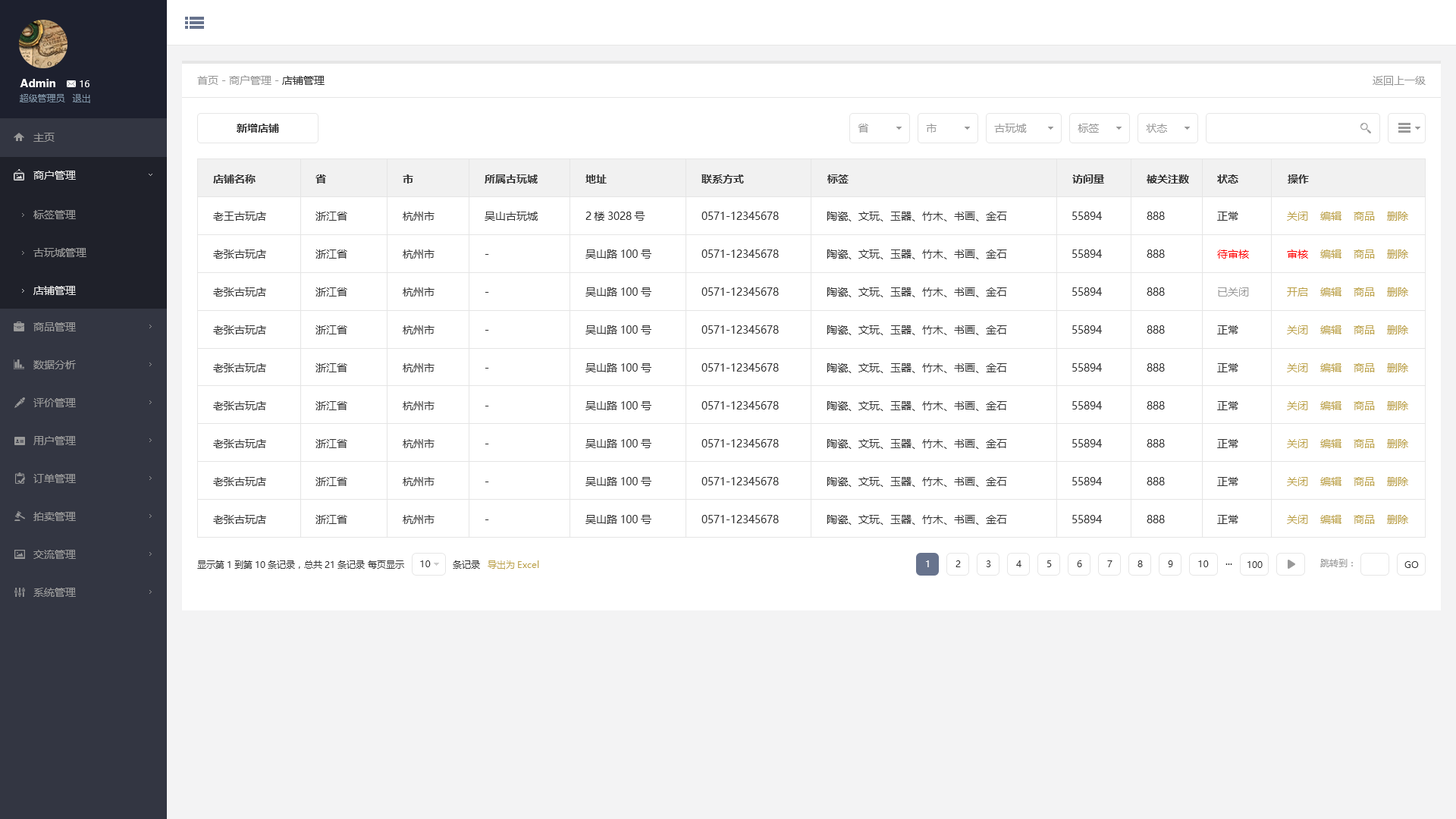
<style>
.page{position:relative;width:1456px;height:819px;background:#ffffff}
.page>*{position:absolute;margin:0}
.t1{font:10.6px "MicrosoftYaHei";color:#999999}
.t2{font:10.6px "MicrosoftYaHei";color:#333333}
.t3{font:10.6px "MicrosoftYaHei-Bold";color:#ffffff}
.t4{font:9.1px "MicrosoftYaHei";color:#ffffff}
.t5{font:9.1px "MicrosoftYaHei";color:#8095a8}
.t6{font:10.6px "MicrosoftYaHei-Bold";color:#333333}
.t7{font:10.6px/37.9px "MicrosoftYaHei";color:#999999}
.t8{font:10.6px/37.9px "MicrosoftYaHei";color:#e6e6e6}
.t9{font:10.6px/37.9px "MicrosoftYaHei";color:#333333}
.t10{font:10.6px/37.9px "MicrosoftYaHei";color:#ff0000}
.t11{font:10.6px/37.9px "MicrosoftYaHei";color:#bda34a}
.t12{font:9.1px "MicrosoftYaHei";color:#333333}
.t13{font:9.1px "MicrosoftYaHei";color:#bda34a}
.t14{font:9.1px "MicrosoftYaHei";color:#999999}
</style>
<div class="page">
<p class="t1" style="left:197px;top:75px;width:128px;height:10px">首页 - 商户管理 - <span class="t2">店铺管理</span></p>
<p class="t1" style="left:1373px;top:76px;width:53px;height:10px">返回上一级</p>
<p class="t3" style="left:20px;top:79px;width:35px;height:8px">Admin</p>
<p class="t4" style="left:80px;top:80px;width:9px;height:7px">16</p>
<p class="t5" style="left:20px;top:94px;width:45px;height:8px">超级管理员</p>
<p class="t5" style="left:72px;top:94px;width:18px;height:9px">退出</p>
<p class="t6" style="left:237px;top:124px;width:42px;height:9px">新增店铺</p>
<p class="t1" style="left:858px;top:124px;width:10px;height:9px">省</p>
<p class="t1" style="left:926px;top:124px;width:11px;height:9px">市</p>
<p class="t1" style="left:994px;top:124px;width:33px;height:9px">古玩城</p>
<p class="t1" style="left:1078px;top:124px;width:21px;height:9px">标签</p>
<p class="t1" style="left:1146px;top:124px;width:21px;height:9px">状态</p>
<p class="t7" style="left:33px;top:133px;width:43px;height:464px">主页<br><span class="t8">商户管理<br><br><br><br></span>商品管理<br>数据分析<br>评价管理<br>用户管理<br>订单管理<br>拍卖管理<br>交流管理<br>系统管理</p>
<p class="t6" style="left:213px;top:174px;width:43px;height:10px">店铺名称</p>
<p class="t6" style="left:315px;top:174px;width:11px;height:10px">省</p>
<p class="t6" style="left:403px;top:174px;width:10px;height:10px">市</p>
<p class="t6" style="left:485px;top:174px;width:53px;height:10px">所属古玩城</p>
<p class="t6" style="left:585px;top:174px;width:22px;height:10px">地址</p>
<p class="t6" style="left:701px;top:174px;width:43px;height:10px">联系方式</p>
<p class="t6" style="left:827px;top:174px;width:22px;height:10px">标签</p>
<p class="t6" style="left:1072px;top:174px;width:32px;height:10px">访问量</p>
<p class="t6" style="left:1147px;top:174px;width:42px;height:10px">被关注数</p>
<p class="t6" style="left:1217px;top:174px;width:21px;height:10px">状态</p>
<p class="t6" style="left:1288px;top:174px;width:21px;height:10px">操作</p>
<p class="t7" style="left:33px;top:210px;width:53px;height:85px">标签管理<br>古玩城管理<br><span class="t8">店铺管理</span></p>
<p class="t9" style="left:213px;top:212px;width:53px;height:312px">老王古玩店<br>老张古玩店<br>老张古玩店<br>老张古玩店<br>老张古玩店<br>老张古玩店<br>老张古玩店<br>老张古玩店<br>老张古玩店</p>
<p class="t9" style="left:315px;top:212px;width:32px;height:312px">浙江省<br>浙江省<br>浙江省<br>浙江省<br>浙江省<br>浙江省<br>浙江省<br>浙江省<br>浙江省</p>
<p class="t9" style="left:403px;top:212px;width:32px;height:312px">杭州市<br>杭州市<br>杭州市<br>杭州市<br>杭州市<br>杭州市<br>杭州市<br>杭州市<br>杭州市</p>
<p class="t9" style="left:485px;top:212px;width:53px;height:308px">吴山古玩城<br>-<br>-<br>-<br>-<br>-<br>-<br>-<br>-</p>
<p class="t9" style="left:585px;top:212px;width:66px;height:312px">2楼3028号<br>吴山路100号<br>吴山路100号<br>吴山路100号<br>吴山路100号<br>吴山路100号<br>吴山路100号<br>吴山路100号<br>吴山路100号</p>
<p class="t9" style="left:701px;top:212px;width:78px;height:311px">0571-12345678<br>0571-12345678<br>0571-12345678<br>0571-12345678<br>0571-12345678<br>0571-12345678<br>0571-12345678<br>0571-12345678<br>0571-12345678</p>
<p class="t9" style="left:827px;top:212px;width:180px;height:313px">陶瓷、文玩、玉器、竹木、书画、金石 <br>陶瓷、文玩、玉器、竹木、书画、金石 <br>陶瓷、文玩、玉器、竹木、书画、金石 <br>陶瓷、文玩、玉器、竹木、书画、金石 <br>陶瓷、文玩、玉器、竹木、书画、金石 <br>陶瓷、文玩、玉器、竹木、书画、金石 <br>陶瓷、文玩、玉器、竹木、书画、金石 <br>陶瓷、文玩、玉器、竹木、书画、金石 <br>陶瓷、文玩、玉器、竹木、书画、金石</p>
<p class="t9" style="left:1072px;top:212px;width:30px;height:311px">55894<br>55894<br>55894<br>55894<br>55894<br>55894<br>55894<br>55894<br>55894</p>
<p class="t9" style="left:1147px;top:212px;width:18px;height:311px">888<br>888<br>888<br>888<br>888<br>888<br>888<br>888<br>888</p>
<p class="t9" style="left:1217px;top:212px;width:32px;height:312px">正常<br><span class="t10">待审核<br></span><span class="t7">已关闭<br></span>正常<br>正常<br>正常<br>正常<br>正常<br>正常</p>
<p class="t11" style="left:1287px;top:212px;width:121px;height:312px">关闭    编辑    商品    删除<br><span class="t10">审核 </span>   编辑    商品    删除<br>开启    编辑    商品    删除<br>关闭    编辑    商品    删除<br>关闭    编辑    商品    删除<br>关闭    编辑    商品    删除<br>关闭    编辑    商品    删除<br>关闭    编辑    商品    删除<br>关闭    编辑    商品    删除</p>
<p class="t12" style="left:197px;top:560px;width:283px;height:9px">显示第1到第10条记录，总共21条记录 每页显示                条记录</p>
<p class="t12" style="left:420px;top:560px;width:11px;height:7px">10</p>
<p class="t13" style="left:488px;top:560px;width:51px;height:10px">导出为Excel</p>
<p class="t4" style="left:926px;top:560px;width:3px;height:7px">1</p>
<p class="t12" style="left:955px;top:560px;width:6px;height:7px">2</p>
<p class="t12" style="left:986px;top:560px;width:5px;height:7px">3</p>
<p class="t12" style="left:1016px;top:560px;width:5px;height:7px">4</p>
<p class="t12" style="left:1047px;top:560px;width:5px;height:7px">5</p>
<p class="t12" style="left:1077px;top:560px;width:5px;height:7px">6</p>
<p class="t12" style="left:1107px;top:560px;width:5px;height:7px">7</p>
<p class="t12" style="left:1137px;top:560px;width:6px;height:7px">8</p>
<p class="t12" style="left:1168px;top:560px;width:5px;height:7px">9</p>
<p class="t12" style="left:1198px;top:560px;width:11px;height:7px">10</p>
<p class="t12" style="left:1225px;top:563px;width:7px;height:2px">...</p>
<p class="t12" style="left:1247px;top:561px;width:16px;height:7px">100</p>
<p class="t14" style="left:1320px;top:559px;width:33px;height:8px">跳转到：</p>
<p class="t12" style="left:1404px;top:561px;width:15px;height:7px">GO</p>
</div>
